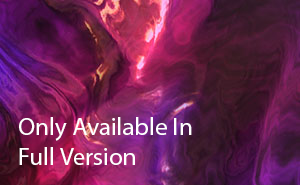
<style>
.page{position:relative;width:300px;height:185px}
.page>*{position:absolute;margin:0}
.t1{font:25px "MyriadPro-Regular";color:#ffffff}
</style>
<div class="page">
<p class="t1" style="left:19px;top:117px;width:173px;height:48px">Only Available In<br>Full Version</p>
</div>
